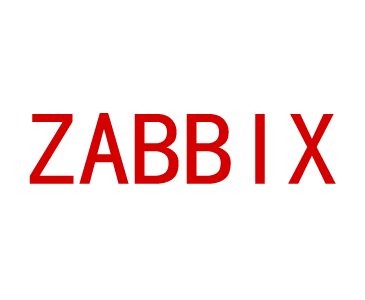
<style>
.page{position:relative;width:365px;height:300px;background:#ffffff}
.page>*{position:absolute;margin:0}
.t1{font:104.2px "SimHei";color:#d40000}
</style>
<div class="page">
<p class="t1" style="left:29px;top:113px;width:307px;height:71px">ZABBIX</p>
</div>
